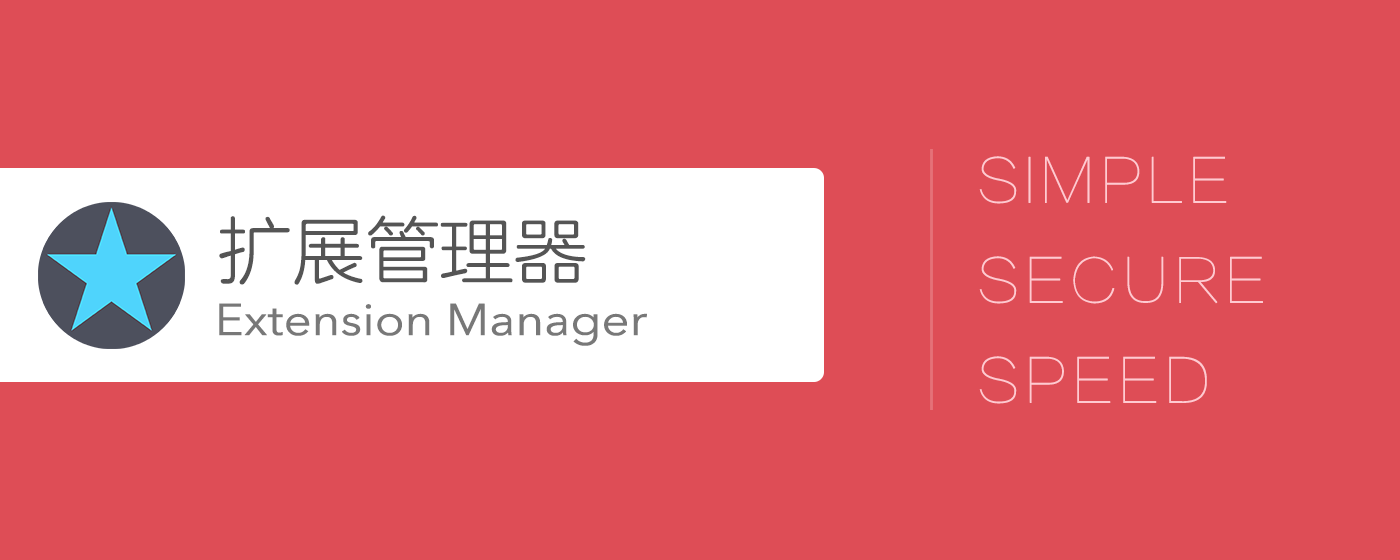
<style>
.page{position:relative;width:1400px;height:560px;background:#de4d56}
.page>*{position:absolute;margin:0}
.t1{font:60px/100px "FZLTCXHJW--GB1-0";color:#ffcad1;font-weight:bold}
.t2{font:72px "FZLANTY_XIANJW--GB1-0";color:#555555;font-weight:bold}
.t3{font:44.1px "AvenirNext-Regular";letter-spacing:-0.02em;color:#787878;font-weight:bold;scale:1.1 1}
</style>
<div class="page">
<p class="t1" style="left:979px;top:156px;width:284px;height:248px">SIMPLE<br>SECURE<br>SPEED</p>
<p class="t2" style="left:219px;top:215px;width:367px;height:70px">扩展管理器</p>
<p class="t3" style="left:219px;top:303px;width:428px;height:43px">Extension Manager</p>
</div>
